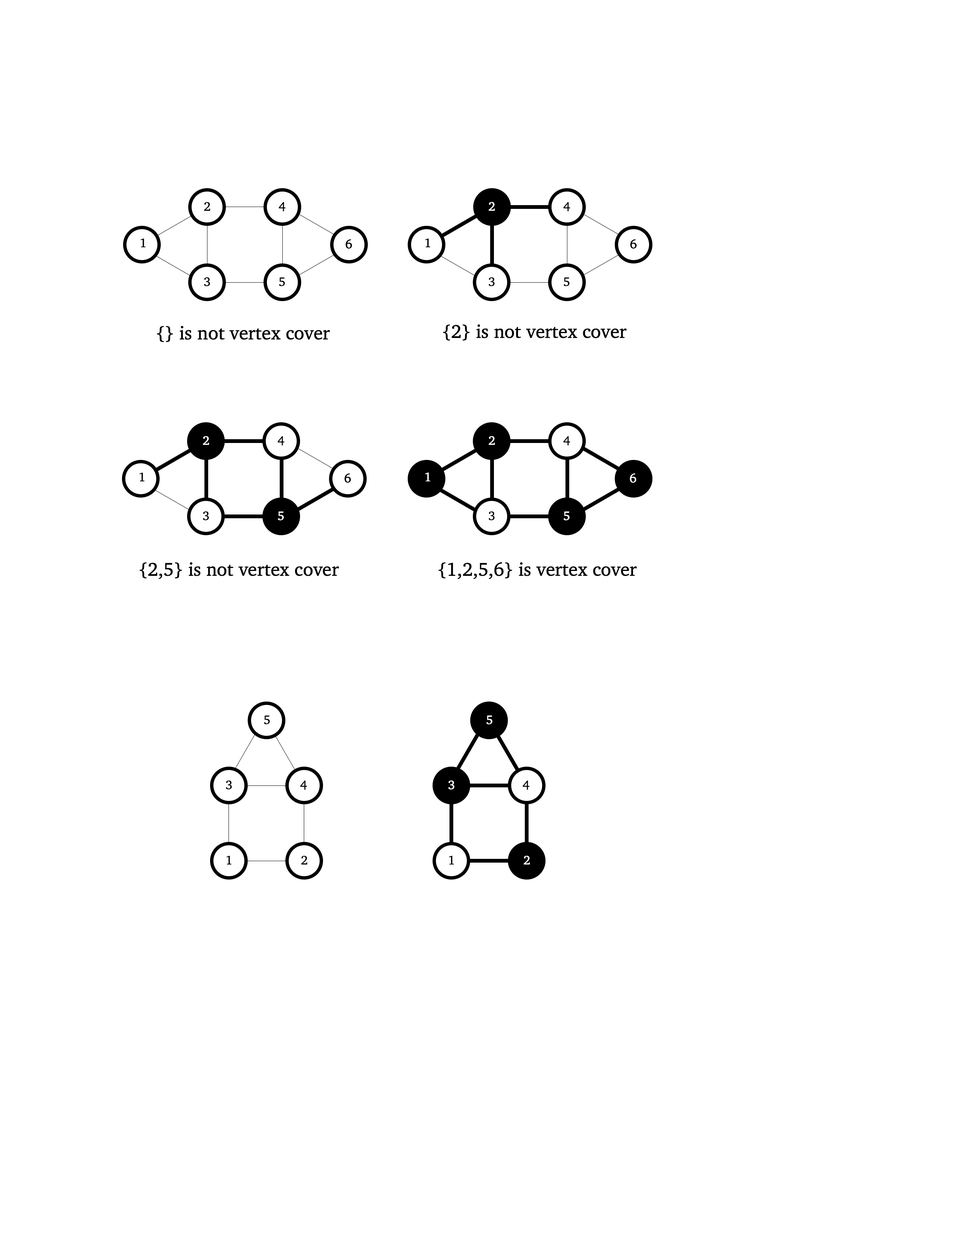
<style>
.page{position:relative;width:960px;height:1242px;background:#ffffff}
.page>*{position:absolute;margin:0}
.t1{font:12.5px "Charter-Roman";color:#000000}
.t2{font:12.5px "Charter-Roman";color:#ffffff}
.t3{font:18.8px "Charter-Roman";color:#000000}
</style>
<div class="page">
<p class="t1" style="left:204px;top:202px;width:6px;height:9px">2</p>
<p class="t1" style="left:279px;top:202px;width:7px;height:10px">4</p>
<p class="t2" style="left:489px;top:202px;width:6px;height:9px">2</p>
<p class="t1" style="left:563px;top:202px;width:7px;height:10px">4</p>
<p class="t1" style="left:140px;top:238px;width:6px;height:9px">1</p>
<p class="t1" style="left:425px;top:238px;width:5px;height:9px">1</p>
<p class="t1" style="left:204px;top:277px;width:6px;height:9px">3</p>
<p class="t1" style="left:279px;top:277px;width:6px;height:9px">5</p>
<p class="t1" style="left:489px;top:277px;width:6px;height:9px">3</p>
<p class="t1" style="left:564px;top:277px;width:6px;height:9px">5</p>
<p class="t3" style="left:157px;top:326px;width:173px;height:16px">{} is not vertex cover coverco</p>
<p class="t3" style="left:443px;top:324px;width:184px;height:17px">{2} is not vertex cover coverco</p>
<p class="t2" style="left:203px;top:436px;width:6px;height:9px">2</p>
<p class="t1" style="left:277px;top:436px;width:8px;height:10px">4</p>
<p class="t2" style="left:489px;top:436px;width:6px;height:9px">2</p>
<p class="t1" style="left:563px;top:436px;width:7px;height:10px">4</p>
<p class="t1" style="left:139px;top:472px;width:6px;height:9px">1</p>
<p class="t2" style="left:425px;top:472px;width:5px;height:9px">1</p>
<p class="t2" style="left:630px;top:473px;width:6px;height:10px">6</p>
<p class="t1" style="left:203px;top:511px;width:6px;height:10px">3</p>
<p class="t2" style="left:278px;top:512px;width:6px;height:9px">5</p>
<p class="t1" style="left:489px;top:511px;width:6px;height:10px">3</p>
<p class="t2" style="left:564px;top:512px;width:6px;height:9px">5</p>
<p class="t3" style="left:139px;top:562px;width:200px;height:17px">{2,5} is not vertex cover coverco</p>
<p class="t3" style="left:438px;top:562px;width:199px;height:17px">{1,2,5,6} is vertex cover coverco</p>
<p class="t1" style="left:264px;top:716px;width:6px;height:9px">5</p>
<p class="t2" style="left:486px;top:716px;width:6px;height:9px">5</p>
<p class="t1" style="left:226px;top:780px;width:6px;height:10px">3</p>
<p class="t1" style="left:300px;top:781px;width:7px;height:9px">4</p>
<p class="t2" style="left:448px;top:780px;width:6px;height:10px">3</p>
<p class="t1" style="left:522px;top:781px;width:8px;height:9px">4</p>
<p class="t1" style="left:226px;top:856px;width:6px;height:9px">1</p>
<p class="t1" style="left:301px;top:856px;width:7px;height:9px">2</p>
<p class="t1" style="left:449px;top:856px;width:5px;height:9px">1</p>
<p class="t2" style="left:524px;top:856px;width:6px;height:9px">2</p>
</div>
